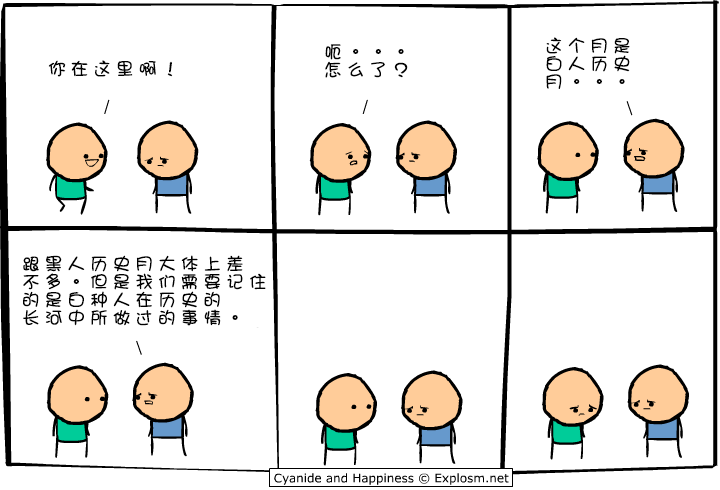
<style>
.page{position:relative;width:720px;height:490px;background:#ffffff}
.page>*{position:absolute;margin:0}
.t1{font:18px/18px "DFGirl";letter-spacing:0.26em;color:#000000}
.t2{font:18px "DFGirl";letter-spacing:0.26em;color:#000000}
</style>
<div class="page">
<p class="t1" style="left:546px;top:37px;width:84px;height:52px">这个月是<br>白人历史<br>月。。。</p>
<p class="t1" style="left:325px;top:44px;width:83px;height:34px">呃。。。<br>怎么了？</p>
<p class="t2" style="left:48px;top:60px;width:125px;height:17px">你在这里啊！</p>
<p class="t1" style="left:23px;top:255px;width:243px;height:71px">跟黑人历史月大体上差<br>不多。但是我们需要记住<br>的是白种人在历史的<br>长河中所做过的事情。</p>
</div>
